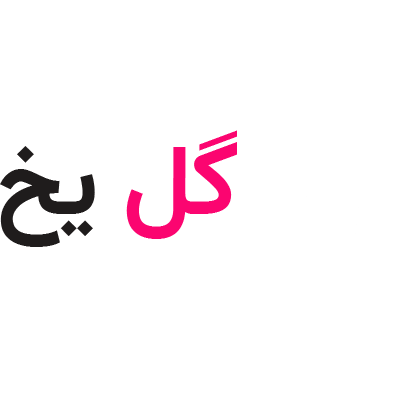
<style>
.page{position:relative;width:400px;height:400px;background:#ffffff}
.page>*{position:absolute;margin:0}
.t1{font:99.2px "Vazir-Bold-WOL";color:#fc0570}
.t2{font:99.2px "Vazir-Bold-WOL";color:#1f1c1c}
</style>
<div class="page">
<p class="t1" style="left:0px;top:130px;width:237px;height:117px">گل<span class="t2"> یخ</span></p>
</div>
